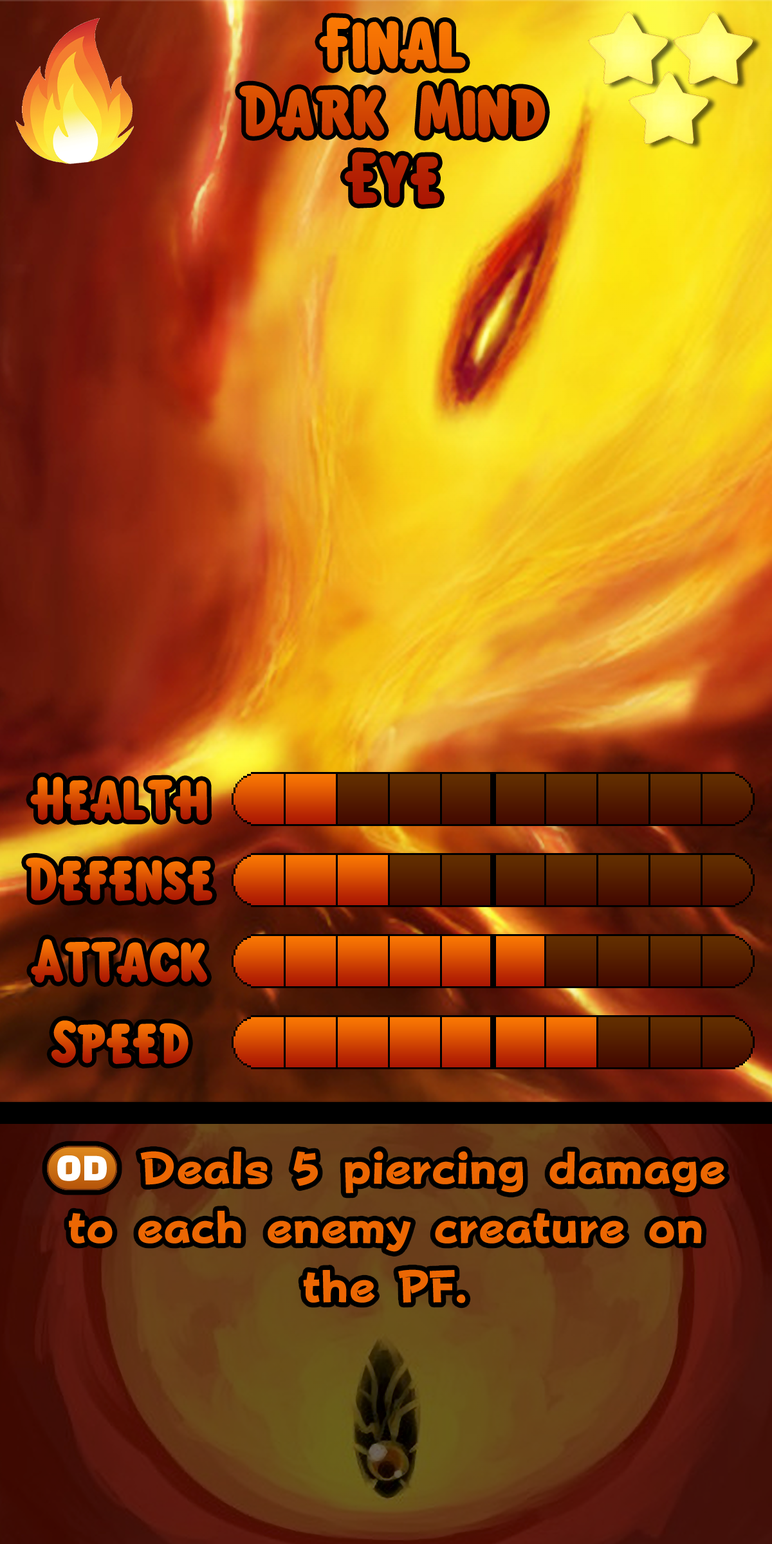
<style>
.page{position:relative;width:772px;height:1544px}
.page>*{position:absolute;margin:0}
.t1{font:110px/67.6px "KirbyClassic"}
.t2{font:92.7px "KirbyClassic"}
.t3{font:77.2px/59.2px "FOTPopHappinessStrp-ExtraBold";color:#ec6703}
.t4{font:77.2px/59.2px "stoogedings-Regular";color:#ec6703}
</style>
<div class="page">
<p class="t1" style="left:239px;top:17px;width:307px;height:188px;text-align:center">Final<br>Dark Mind<br>Eye</p>
<p class="t2" style="left:30px;top:777px;width:178px;height:44px">Health</p>
<p class="t2" style="left:26px;top:858px;width:186px;height:44px">Defense</p>
<p class="t2" style="left:31px;top:939px;width:176px;height:44px">Attack</p>
<p class="t2" style="left:51px;top:1021px;width:138px;height:43px">Speed</p>
<p class="t3" style="left:47px;top:1146px;width:678px;height:158px;text-align:center"><span class="t4">(OD)</span> Deals 5 piercing damage to each enemy creature on the PF.</p>
</div>
